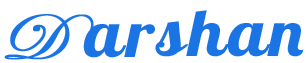
<style>
.page{position:relative;width:306px;height:63px;background:#ffffff}
.page>*{position:absolute;margin:0}
.t1{font:65.3px "Lobster-Regular";letter-spacing:0.04em;color:#1b74e4;scale:1.13 1}
.t2{font:65.3px "EdwardianScriptITC";letter-spacing:0.04em;color:#1b74e4;font-weight:bold;scale:1.13 1}
</style>
<div class="page">
<p class="t1" style="left:4px;top:10px;width:300px;height:50px"><span class="t2">D </span>arshan</p>
</div>
